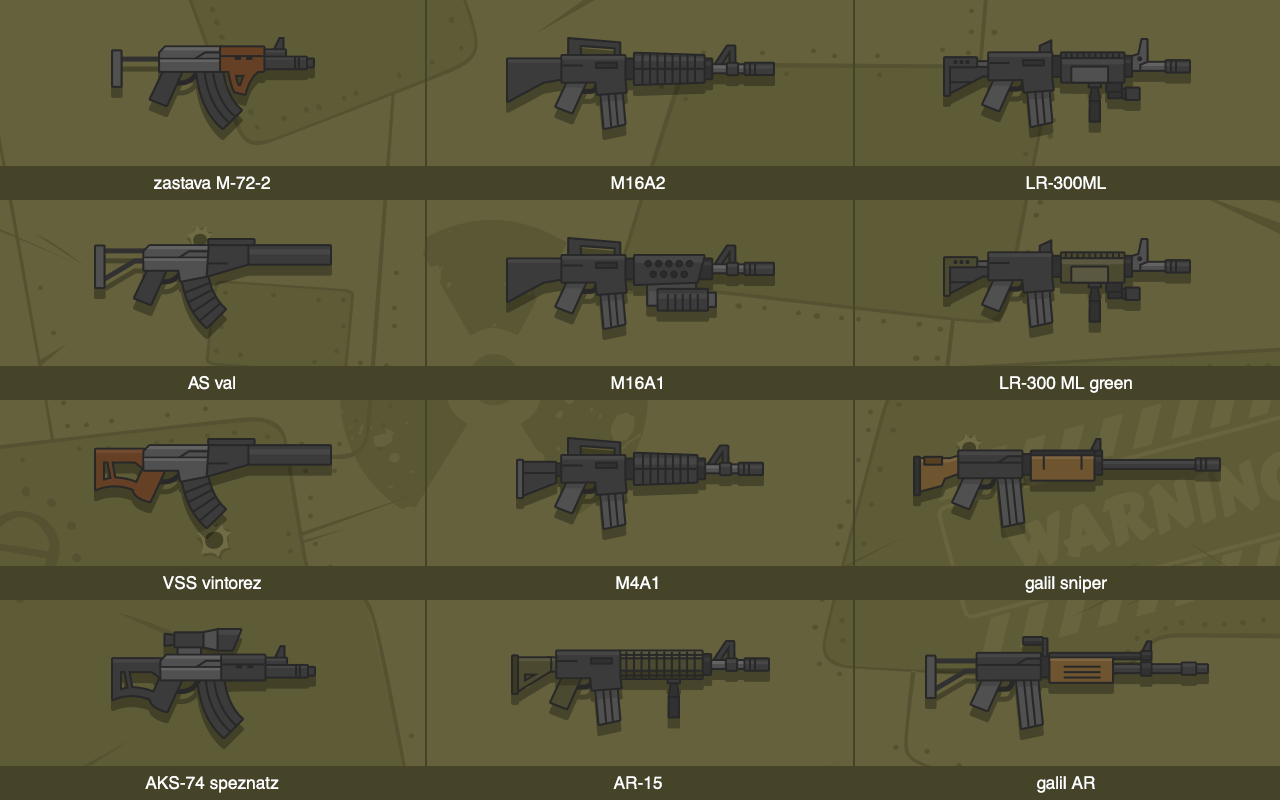
<style>
.page{position:relative;width:1280px;height:800px;background:#64613c}
.page>*{position:absolute;margin:0}
.t1{font:17.4px/200px "HelveticaCE-Regular";color:#ffffff}
</style>
<div class="page">
<p class="t1" style="left:145px;top:176px;width:134px;height:617px;text-align:center">zastava M-72-2<br>AS val<br>VSS vintorez<br>AKS-74 speznatz</p>
<p class="t1" style="left:611px;top:176px;width:54px;height:614px;text-align:center">M16A2<br>M16A1<br>M4A1<br>AR-15</p>
<p class="t1" style="left:1000px;top:176px;width:132px;height:617px;text-align:center">LR-300ML<br>LR-300 ML green<br>galil sniper<br>galil AR</p>
</div>
